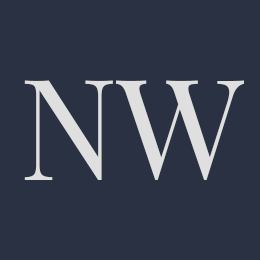
<style>
.page{position:relative;width:260px;height:260px;background:#2a3143}
.page>*{position:absolute;margin:0}
.t1{font:140px "PlayfairDisplay-Regular";color:#dfdfdf}
</style>
<div class="page">
<p class="t1" style="left:24px;top:80px;width:220px;height:100px">NW</p>
</div>
